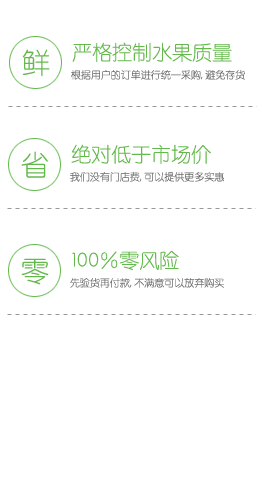
<style>
.page{position:relative;width:262px;height:500px;background:#ffffff}
.page>*{position:absolute;margin:0}
.t1{font:28px "STYuanti-SC-Light";color:#63b94c}
.t2{font:20px "STYuanti-SC-Light";color:#63b94c}
.t3{font:10px "STYuanti-SC-Light";color:#6b6b6b}
</style>
<div class="page">
<p class="t1" style="left:22px;top:49px;width:28px;height:28px">鲜</p>
<p class="t2" style="left:72px;top:42px;width:160px;height:20px">严格控制水果质量</p>
<p class="t3" style="left:71px;top:70px;width:174px;height:10px">根据用户的订单进行统一采购, 避免存货</p>
<p class="t2" style="left:71px;top:144px;width:140px;height:20px">绝对低于市场价</p>
<p class="t1" style="left:21px;top:151px;width:27px;height:27px">省</p>
<p class="t3" style="left:70px;top:172px;width:154px;height:10px">我们没有门店费, 可以提供更多实惠</p>
<p class="t2" style="left:72px;top:251px;width:107px;height:19px">100%零风险</p>
<p class="t1" style="left:21px;top:258px;width:28px;height:27px">零</p>
<p class="t3" style="left:70px;top:278px;width:154px;height:10px">先验货再付款, 不满意可以放弃购买</p>
</div>
